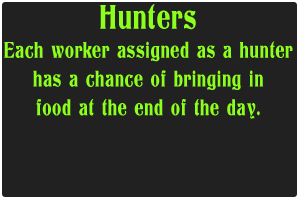
<style>
.page{position:relative;width:300px;height:200px;background:#212121}
.page>*{position:absolute;margin:0}
.t1{font:24px "Titania";letter-spacing:0.025em;color:#8cff1c;scale:0.7 1}
.t2{font:36px "Titania";letter-spacing:0.025em;color:#8cff1c;scale:0.7 1}
</style>
<div class="page">
<p class="t1" style="left:4px;top:4px;width:289px;height:115px;text-align:center"><span class="t2">Hunters<br></span>Each worker assigned as a hunter<br>has a chance of bringing in <br>food at the end of the day.</p>
</div>
